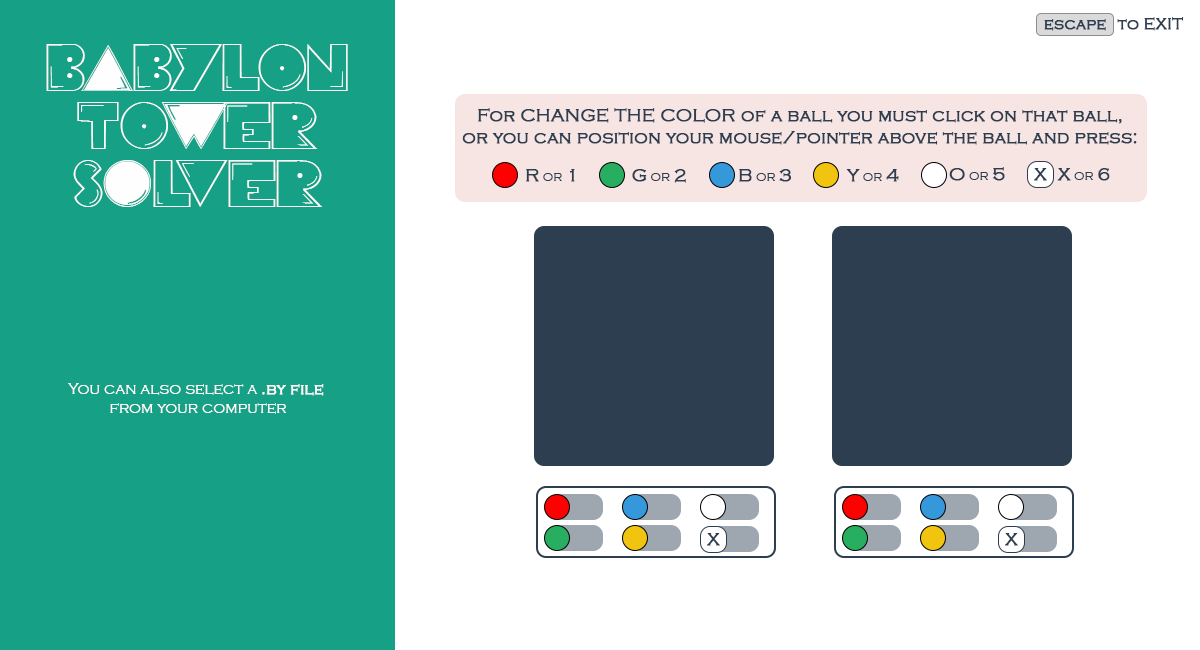
<style>
.page{position:relative;width:1200px;height:650px;background:#ffffff}
.page>*{position:absolute;margin:0}
.t1{font:16px "CopperplateGothic-Light";color:#2c3e50;font-weight:bold}
.t2{font:48px "PacFont";color:#fffefe}
.t3{font:18px "CopperplateGothic-Light";color:#2c3e50;font-weight:bold}
.t4{font:14px "CopperplateGothic-Light";color:#2c3e50}
.t5{font:16px "CopperplateGothic-Light";color:#fffefe}
.t6{font:16px "CopperplateGothic-Light";color:#fffefe;font-weight:bold}
</style>
<div class="page">
<p class="t1" style="left:1117px;top:17px;width:67px;height:14px">to EXIT</p>
<p class="t1" style="left:1044px;top:19px;width:62px;height:12px">escape</p>
<p class="t2" style="left:46px;top:44px;width:302px;height:163px;text-align:center">BaBYLON<br>TOwER<br>SoLVER</p>
<p class="t3" style="left:462px;top:108px;width:675px;height:37px;text-align:center">For CHANGE THE COLOR of a ball you must click on that ball,<br>or you can position your mouse/pointer above the ball and press:</p>
<p class="t4" style="left:526px;top:169px;width:49px;height:13px"><span class="t3">R</span> or <span class="t3">1</span></p>
<p class="t4" style="left:632px;top:169px;width:54px;height:14px"><span class="t3">G</span> or <span class="t3">2</span></p>
<p class="t4" style="left:739px;top:169px;width:53px;height:13px"><span class="t3">B</span> or <span class="t3">3</span></p>
<p class="t4" style="left:846px;top:169px;width:53px;height:13px"><span class="t3">Y</span> or <span class="t3">4</span></p>
<p class="t4" style="left:949px;top:167px;width:56px;height:14px"><span class="t3">O</span> or <span class="t3">5</span></p>
<p class="t3" style="left:1034px;top:168px;width:13px;height:13px">X</p>
<p class="t4" style="left:1057px;top:168px;width:53px;height:13px"><span class="t3">X</span> or <span class="t3">6</span></p>
<p class="t5" style="left:68px;top:383px;width:256px;height:31px;text-align:center">You can also select a <span class="t6">.by file</span> <br>from your computer</p>
<p class="t3" style="left:707px;top:533px;width:13px;height:13px">X</p>
<p class="t3" style="left:1005px;top:533px;width:13px;height:13px">X</p>
</div>
